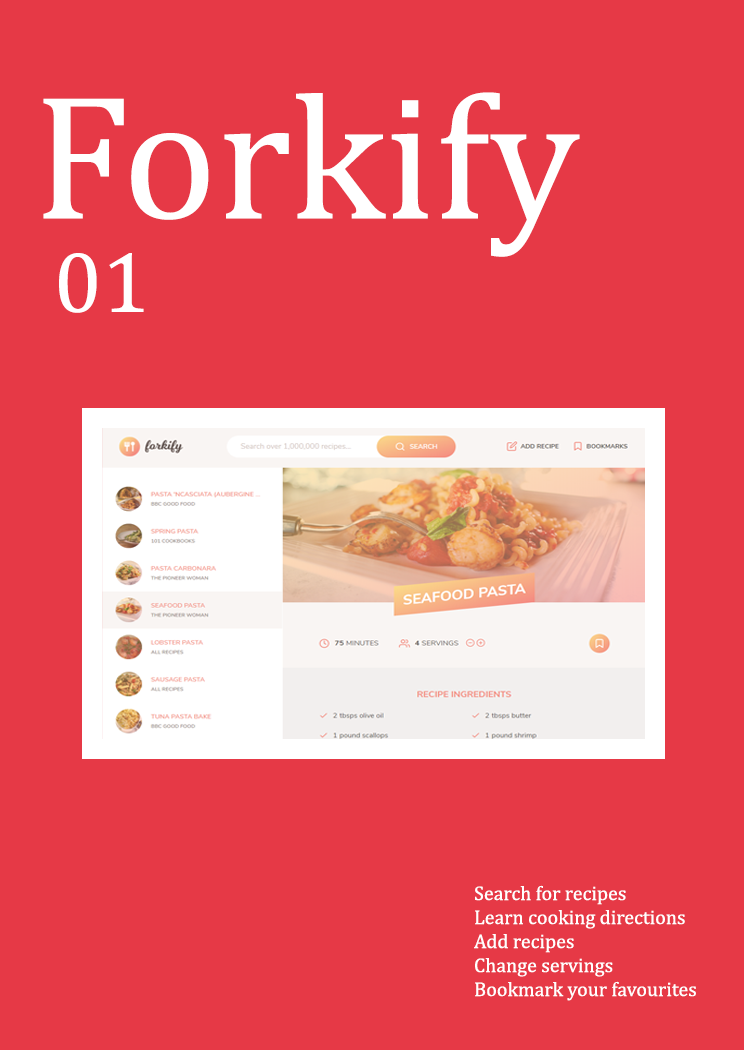
<style>
.page{position:relative;width:744px;height:1050px;background:#e63946}
.page>*{position:absolute;margin:0}
.t1{font:179.3px "Cambria";color:#ffffff}
.t2{font:87.3px "Cambria";color:#ffffff}
.t3{font:20px "Cambria";color:#ffffff}
</style>
<div class="page">
<p class="t1" style="left:43px;top:92px;width:537px;height:165px">Forkify</p>
<p class="t2" style="left:59px;top:253px;width:85px;height:60px">01</p>
<p class="t3" style="left:474px;top:885px;width:222px;height:116px">Search for recipes<br>Learn cooking directions <br>Add recipes<br>Change servings <br>Bookmark your favourites</p>
</div>
